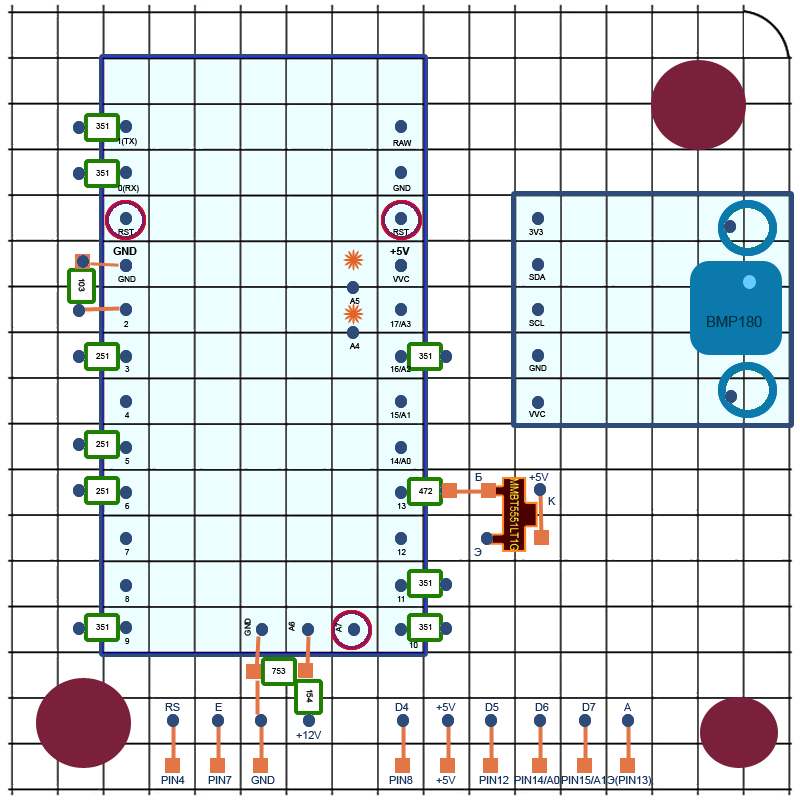
<style>
.page{position:relative;width:800px;height:800px;background:#ffffff}
.page>*{position:absolute;margin:0}
.t1{font:8px "ArialMT";color:#000000}
.t2{font:10.7px "Arial-BoldMT";color:#000000}
.t3{font:10.7px "ArialMT";color:#14345e}
.t4{font:8px "ArialMT"}
</style>
<div class="page">
<p class="t1" style="left:96px;top:123px;width:13px;height:6px">351</p>
<p class="t1" style="left:117px;top:138px;width:20px;height:8px">1(TX)</p>
<p class="t1" style="left:393px;top:140px;width:19px;height:6px">RAW</p>
<p class="t1" style="left:96px;top:170px;width:13px;height:6px">351</p>
<p class="t1" style="left:118px;top:185px;width:21px;height:8px">0(RX)</p>
<p class="t1" style="left:393px;top:185px;width:18px;height:6px">GND</p>
<p class="t1" style="left:118px;top:229px;width:16px;height:6px">RST</p>
<p class="t1" style="left:393px;top:229px;width:16px;height:6px">RST</p>
<p class="t1" style="left:529px;top:229px;width:14px;height:6px">3V3</p>
<p class="t2" style="left:113px;top:247px;width:24px;height:8px">GND</p>
<p class="t2" style="left:390px;top:247px;width:20px;height:8px">+5V</p>
<p class="t1" style="left:78px;top:278px;width:7px;height:14px;rotate:90deg">103</p>
<p class="t1" style="left:118px;top:276px;width:18px;height:6px">GND</p>
<p class="t1" style="left:393px;top:276px;width:17px;height:6px">VVC</p>
<p class="t1" style="left:529px;top:274px;width:17px;height:6px">SDA</p>
<p class="t1" style="left:349px;top:298px;width:11px;height:6px">A5</p>
<p class="t1" style="left:124px;top:321px;width:5px;height:6px">2</p>
<p class="t1" style="left:390px;top:321px;width:21px;height:6px">17/A3</p>
<p class="t1" style="left:529px;top:320px;width:16px;height:6px">SCL</p>
<p class="t1" style="left:96px;top:353px;width:13px;height:6px">251</p>
<p class="t1" style="left:349px;top:343px;width:11px;height:6px">A4</p>
<p class="t1" style="left:419px;top:353px;width:13px;height:6px">351</p>
<p class="t1" style="left:125px;top:366px;width:5px;height:6px">3</p>
<p class="t1" style="left:390px;top:366px;width:21px;height:6px">16/A2</p>
<p class="t1" style="left:529px;top:365px;width:18px;height:6px">GND</p>
<p class="t1" style="left:125px;top:412px;width:5px;height:6px">4</p>
<p class="t1" style="left:390px;top:412px;width:20px;height:6px">15/A1</p>
<p class="t1" style="left:529px;top:411px;width:17px;height:6px">VVC</p>
<p class="t1" style="left:96px;top:441px;width:13px;height:6px">251</p>
<p class="t1" style="left:125px;top:458px;width:5px;height:6px">5</p>
<p class="t1" style="left:390px;top:458px;width:21px;height:6px">14/A0</p>
<p class="t3" style="left:475px;top:473px;width:7px;height:8px">Б</p>
<p class="t3" style="left:529px;top:473px;width:20px;height:8px">+5V</p>
<p class="t1" style="left:96px;top:488px;width:13px;height:6px">251</p>
<p class="t1" style="left:419px;top:488px;width:14px;height:6px">472</p>
<p class="t3" style="left:548px;top:497px;width:8px;height:8px">K</p>
<p class="t1" style="left:125px;top:503px;width:5px;height:6px">6</p>
<p class="t1" style="left:397px;top:503px;width:9px;height:6px">13</p>
<p class="t1" style="left:125px;top:549px;width:5px;height:6px">7</p>
<p class="t1" style="left:397px;top:549px;width:9px;height:6px">12</p>
<p class="t3" style="left:474px;top:548px;width:8px;height:8px">Э</p>
<p class="t1" style="left:419px;top:580px;width:13px;height:6px">351</p>
<p class="t1" style="left:125px;top:596px;width:5px;height:6px">8</p>
<p class="t4" style="left:397px;top:596px;width:7px;height:6px">11</p>
<p class="t1" style="left:96px;top:624px;width:13px;height:6px">351</p>
<p class="t1" style="left:244px;top:618px;width:7px;height:18px;rotate:-90deg">GND</p>
<p class="t4" style="left:288px;top:621px;width:7px;height:10px;rotate:-90deg">A6</p>
<p class="t4" style="left:335px;top:622px;width:7px;height:10px;rotate:-90deg">A7</p>
<p class="t1" style="left:419px;top:624px;width:13px;height:6px">351</p>
<p class="t1" style="left:125px;top:638px;width:5px;height:6px">9</p>
<p class="t1" style="left:409px;top:642px;width:9px;height:6px">10</p>
<p class="t1" style="left:272px;top:668px;width:14px;height:6px">753</p>
<p class="t1" style="left:306px;top:689px;width:7px;height:14px;rotate:90deg">154</p>
<p class="t3" style="left:165px;top:703px;width:15px;height:8px">RS</p>
<p class="t3" style="left:215px;top:703px;width:7px;height:8px">E</p>
<p class="t3" style="left:395px;top:703px;width:14px;height:8px">D4</p>
<p class="t3" style="left:436px;top:703px;width:20px;height:8px">+5V</p>
<p class="t3" style="left:485px;top:703px;width:14px;height:8px">D5</p>
<p class="t3" style="left:535px;top:703px;width:14px;height:8px">D6</p>
<p class="t3" style="left:582px;top:703px;width:14px;height:8px">D7</p>
<p class="t3" style="left:624px;top:703px;width:8px;height:8px">A</p>
<p class="t3" style="left:296px;top:731px;width:26px;height:8px">+12V</p>
<p class="t3" style="left:161px;top:776px;width:24px;height:8px">PIN4</p>
<p class="t3" style="left:208px;top:776px;width:24px;height:8px">PIN7</p>
<p class="t3" style="left:251px;top:776px;width:24px;height:8px">GND</p>
<p class="t3" style="left:389px;top:776px;width:24px;height:8px">PIN8</p>
<p class="t3" style="left:436px;top:776px;width:20px;height:8px">+5V</p>
<p class="t3" style="left:479px;top:776px;width:30px;height:8px">PIN12</p>
<p class="t3" style="left:514px;top:776px;width:46px;height:8px">PIN14/A0</p>
<p class="t3" style="left:561px;top:776px;width:44px;height:8px">PIN15/A1</p>
<p class="t3" style="left:607px;top:776px;width:45px;height:10px">Э(PIN13)</p>
</div>
